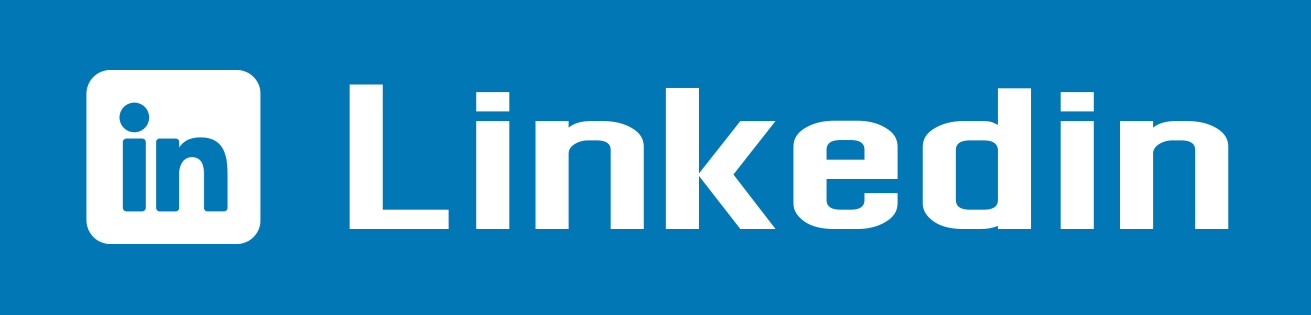
<style>
.page{position:relative;width:1311px;height:315px;background:#0277b5}
.page>*{position:absolute;margin:0}
.t1{font:300px "Dhurjati";color:#ffffff}
</style>
<div class="page">
<p class="t1" style="left:349px;top:84px;width:880px;height:145px">Linkedin</p>
</div>
